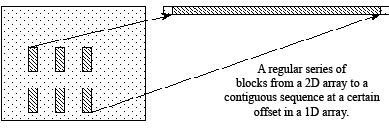
<style>
.page{position:relative;width:389px;height:128px;background:#ffffff}
.page>*{position:absolute;margin:0}
.t1{font:12px "TimesNewRomanPSMT";color:#000000}
</style>
<div class="page">
<p class="t1" style="left:224px;top:64px;width:156px;height:55px;text-align:center">A regular series of<br>blocks from a 2D array to a<br>contiguous sequence at a certain<br>offset in a 1D array.</p>
</div>
